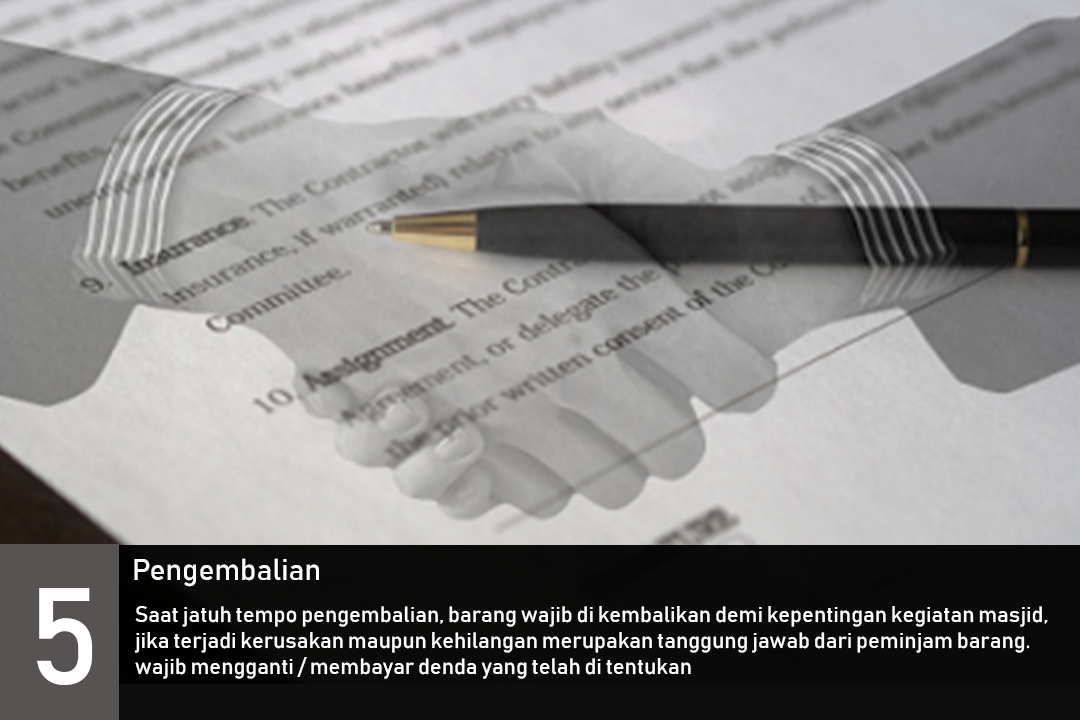
<style>
.page{position:relative;width:1080px;height:720px}
.page>*{position:absolute;margin:0}
.t1{font:30px "Bahnschrift";color:#ffffff}
.t2{font:135.3px "Bahnschrift";color:#ffffff}
.t3{font:22px "Bahnschrift";color:#ffffff}
</style>
<div class="page">
<p class="t1" style="left:134px;top:558px;width:185px;height:29px">Pengembalian</p>
<p class="t2" style="left:37px;top:588px;width:56px;height:97px">5</p>
<p class="t3" style="left:134px;top:606px;width:914px;height:73px">Saat jatuh tempo pengembalian, barang wajib di kembalikan demi kepentingan kegiatan masjid, jika terjadi kerusakan maupun kehilangan merupakan tanggung jawab dari peminjam barang. wajib mengganti / membayar denda yang telah di tentukan</p>
</div>
